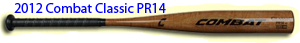
<style>
.page{position:relative;width:300px;height:43px;background:#ffffff}
.page>*{position:absolute;margin:0}
.t1{font:14px "MyriadPro-Regular";color:#0000ff}
</style>
<div class="page">
<p class="t1" style="left:14px;top:3px;width:152px;height:10px">2012 Combat Classic PR14</p>
</div>
